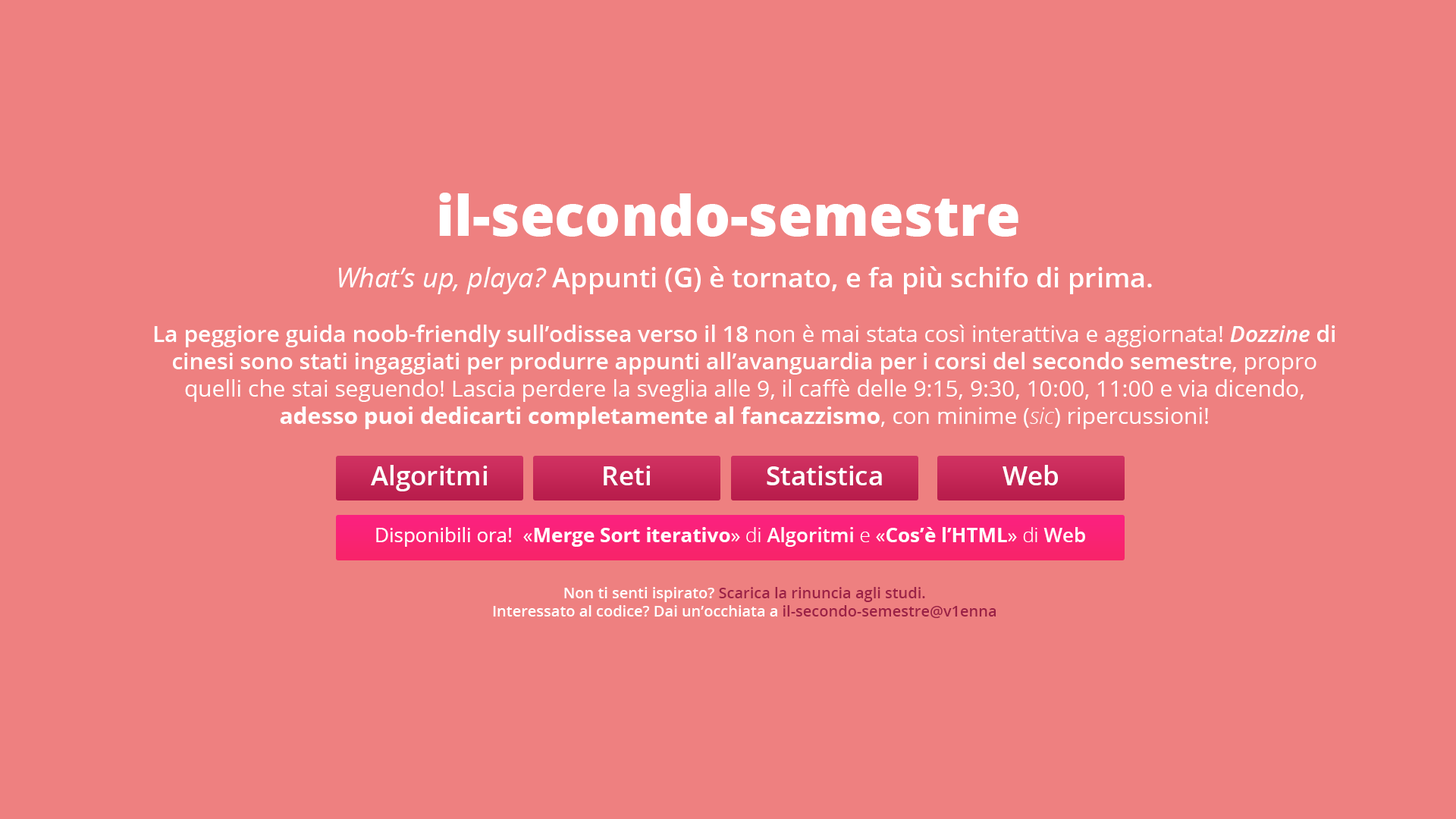
<style>
.page{position:relative;width:1456px;height:819px;background:#ee8080}
.page>*{position:absolute;margin:0}
.t1{font:56.1px "OpenSans-ExtraBold";color:#ffffff}
.t2{font:22.7px "OpenSans-Regular";color:#ffffff}
.t3{font:27.3px "OpenSans-Italic";color:#ffffff}
.t4{font:27.3px "OpenSans-SemiBold";color:#ffffff}
.t5{font:22.7px "OpenSans-SemiBold";color:#ffffff}
.t6{font:22.7px "OpenSans-SemiBoldItalic";color:#ffffff}
.t7{font:22.7px "OpenSans-Bold";color:#ffffff}
.t8{font:22.7px "OpenSans-LightItalic";color:#ffffff}
.t9{font:15.2px "OpenSans-SemiBold";color:#ffffff}
.t10{font:15.2px "OpenSans-SemiBold";color:#9c2247}
.t11{font:15.2px "OpenSans-SemiBold";color:#9b2146}
.t12{font:26.5px "OpenSans-SemiBold";color:#ffffff}
.t13{font:19.7px "OpenSans-Bold";color:#ffffff}
.t14{font:19.7px "OpenSans-Regular";color:#ffffff}
.t15{font:19.7px "OpenSans-Light";color:#ffffff}
.t16{font:19.7px "OpenSans-SemiBold";color:#ffffff}
</style>
<div class="page">
<p class="t1" style="left:439px;top:193px;width:579px;height:44px">il-secondo-semestre</p>
<p class="t2" style="left:154px;top:266px;width:1181px;height:352px;text-align:center"><span class="t3">What’s up, playa? </span><span class="t4">Appunti (G) è tornato, e fa più schifo di prima.<br><br></span><span class="t5">La peggiore guida noob-friendly sull’odissea verso il 18</span> non è mai stata così interattiva e aggiornata! <span class="t6">Dozzine</span><span class="t5"> di cinesi sono stati ingaggiati per produrre appunti all’avanguardia per i corsi del secondo semestre</span>, propro quelli che stai seguendo! Lascia perdere la sveglia alle 9, il caffè delle 9:15, 9:30, 10:00, 11:00 e via dicendo, <span class="t7">adesso puoi dedicarti completamente al fancazzismo</span>, con minime (<span class="t8">sic</span>) ripercussioni! <br><br><br><br><br><br><span class="t9"><br><br>Non ti senti ispirato? </span><span class="t10">Scarica la rinuncia agli studi.<br></span><span class="t9">Interessato al codice? Dai un’occhiata a </span><span class="t11">il-secondo-semestre@v1enna</span></p>
<p class="t12" style="left:371px;top:465px;width:117px;height:26px">Algoritmi</p>
<p class="t12" style="left:604px;top:466px;width:47px;height:19px">Reti</p>
<p class="t12" style="left:767px;top:466px;width:115px;height:19px">Statistica</p>
<p class="t12" style="left:1003px;top:465px;width:55px;height:20px">Web</p>
<p class="t13" style="left:376px;top:527px;width:709px;height:20px"><span class="t14">Disponibili ora!  «</span>Merge Sort iterativo<span class="t14">» </span><span class="t15">di </span><span class="t16">Algoritmi </span><span class="t15">e</span><span class="t14"> «</span>Cos’è l’HTML<span class="t14">»</span><span class="t15"> di </span><span class="t16">Web</span></p>
</div>
